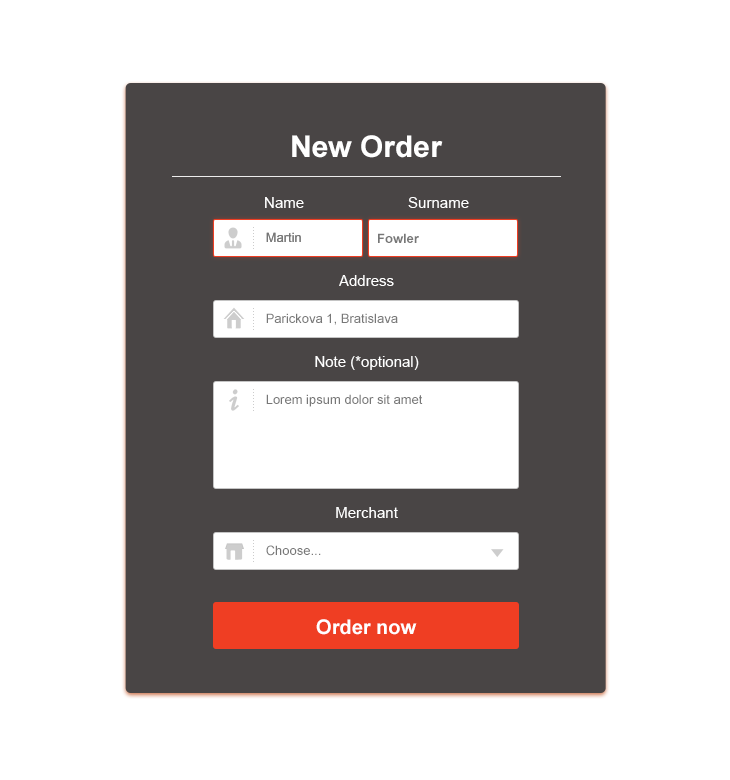
<style>
.page{position:relative;width:730px;height:780px;background:#ffffff}
.page>*{position:absolute;margin:0}
.t1{font:30px "Arial-BoldMT";color:#ffffff}
.t2{font:13px "ArialMT";color:#777777}
.t3{font:13px "Arial-BoldMT";color:#777777}
.t4{font:20px "Arial-BoldMT";color:#ffffff}
</style>
<div class="page">
<p class="t1" style="left:292px;top:135px;width:151px;height:23px">New Order</p>
<p class="t2" style="left:266px;top:232px;width:35px;height:10px">Martin</p>
<p class="t2" style="left:266px;top:232px;width:35px;height:10px">Martin</p>
<p class="t3" style="left:378px;top:233px;width:41px;height:10px">Fowler</p>
<p class="t2" style="left:266px;top:313px;width:132px;height:12px">Parickova 1, Bratislava</p>
<p class="t2" style="left:266px;top:394px;width:157px;height:13px">Lorem ipsum dolor sit amet</p>
<p class="t2" style="left:266px;top:545px;width:55px;height:11px">Choose...</p>
<p class="t4" style="left:316px;top:619px;width:101px;height:16px">Order now</p>
</div>
